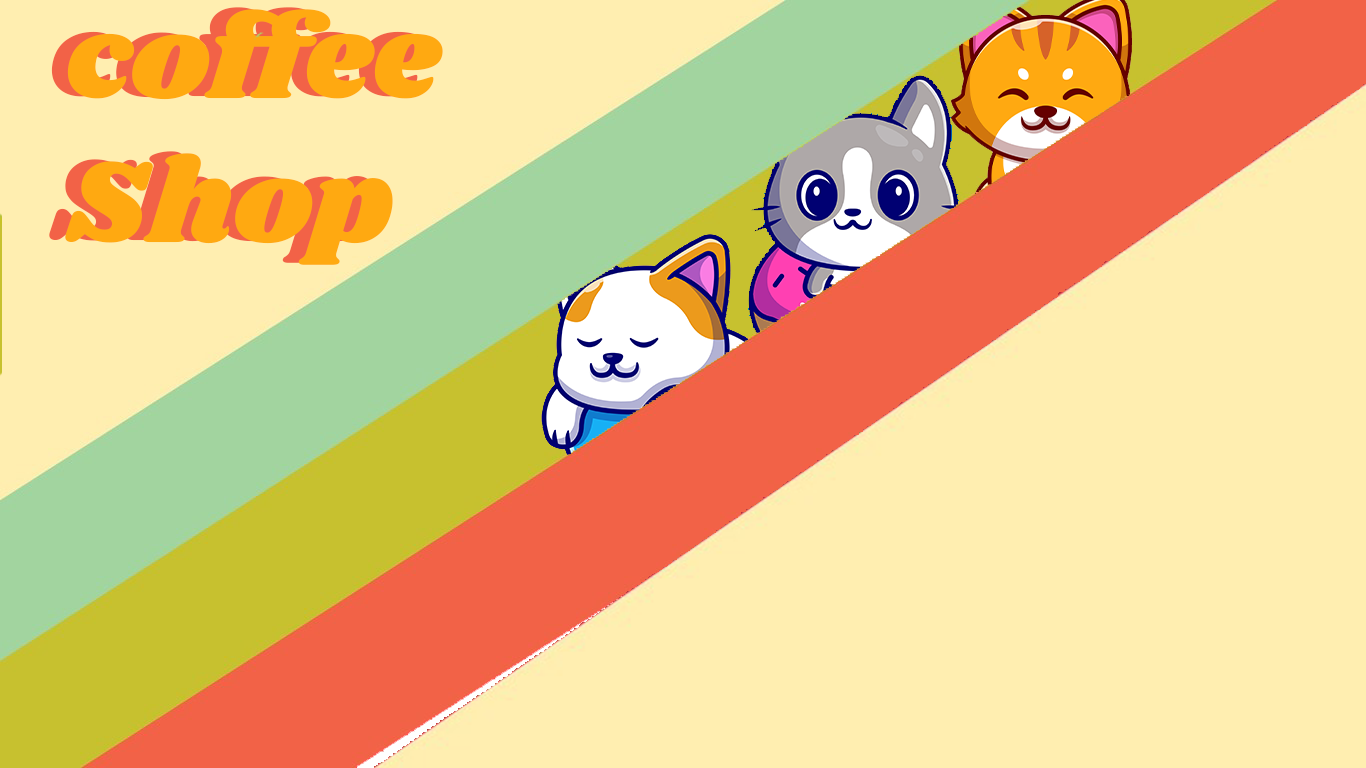
<style>
.page{position:relative;width:1366px;height:768px;background:#ffeeb0}
.page>*{position:absolute;margin:0}
.t1{font:120px "Shrikhand-Regular"}
.t2{font:120px "Shrikhand-Regular";color:#ffa911}
</style>
<div class="page">
<p class="t1" style="left:49px;top:7px;width:378px;height:256px">coffee<br>Shop</p>
<p class="t2" style="left:65px;top:9px;width:378px;height:256px">coffee<br>Shop</p>
</div>
